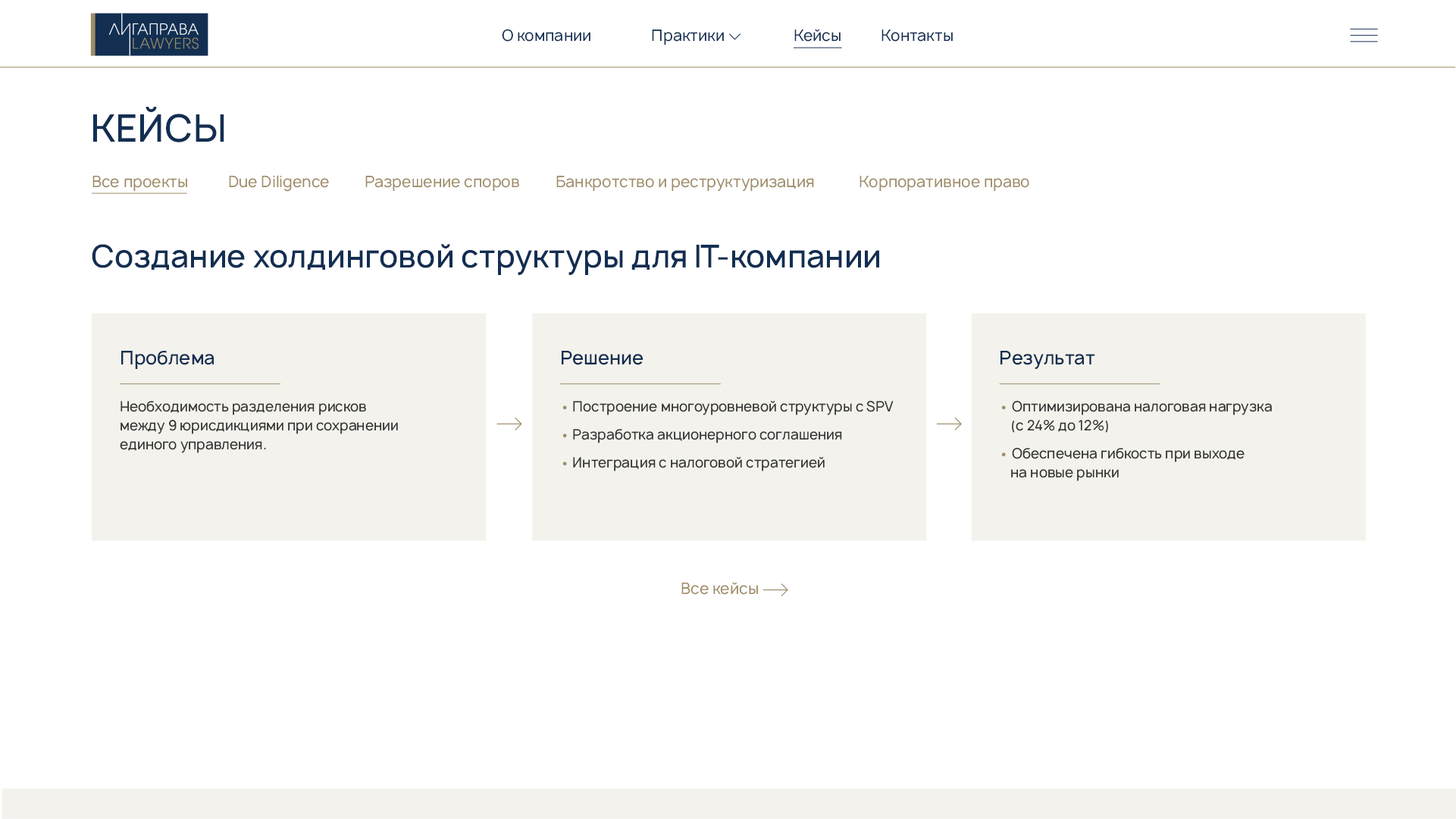
<style>
.page{position:relative;width:1456px;height:819px;background:#ffffff}
.page>*{position:absolute;margin:0}
.t1{font:15.2px "Manrope-Regular";color:#122f52}
.t2{font:36.4px "Manrope-Medium";color:#122f52}
.t3{font:15.2px "Manrope-Regular";color:#9e8d68}
.t4{font:30.3px "Manrope-Medium";color:#122f52}
.t5{font:18.2px "Manrope-Medium";color:#122f52}
.t6{font:13.6px/18.9px "Manrope-Regular";color:#333333}
.t7{font:13.6px/18.9px "Manrope-Regular";color:#9e8d68}
</style>
<div class="page">
<p class="t1" style="left:502px;top:29px;width:88px;height:13px">О компании</p>
<p class="t1" style="left:652px;top:30px;width:72px;height:15px">Практики</p>
<p class="t1" style="left:794px;top:29px;width:46px;height:13px">Кейсы</p>
<p class="t1" style="left:881px;top:30px;width:72px;height:12px">Контакты</p>
<p class="t2" style="left:93px;top:107px;width:131px;height:35px">КЕЙСЫ</p>
<p class="t3" style="left:92px;top:175px;width:937px;height:17px">Все проекты  Due Diligence  Разрешение споров  Банкротство и реструктуризация   Корпоративное право</p>
<p class="t4" style="left:92px;top:244px;width:787px;height:31px">Создание холдинговой структуры для IT-компании</p>
<p class="t5" style="left:121px;top:351px;width:93px;height:18px">Проблема</p>
<p class="t5" style="left:562px;top:351px;width:81px;height:14px">Решение</p>
<p class="t5" style="left:1000px;top:351px;width:95px;height:18px">Результат</p>
<p class="t6" style="left:120px;top:401px;width:278px;height:52px">Необходимость разделения рисков<br>между 9 юрисдикциями при сохранении<br>единого управления.</p>
<p class="t6" style="left:562px;top:401px;width:331px;height:70px"><span class="t7">• </span>Построение многоуровневой структуры с SPV<br><span class="t7">• </span>Разработка акционерного соглашения<br><span class="t7">• </span>Интеграция с налоговой стратегией</p>
<p class="t6" style="left:1001px;top:401px;width:271px;height:80px"><span class="t7">• </span>Оптимизирована налоговая нагрузка<br>(с 24% до 12%)<br><span class="t7">• </span>Обеспечена гибкость при выходе<br>на новые рынки</p>
<p class="t3" style="left:681px;top:582px;width:77px;height:13px">Все кейсы</p>
</div>
